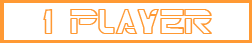
<style>
.page{position:relative;width:252px;height:43px;background:#ffffff}
.page>*{position:absolute;margin:0}
.t1{font:36px "TRN";color:#ff9933}
</style>
<div class="page">
<p class="t1" style="left:43px;top:9px;width:169px;height:25px">1 Player</p>
</div>
